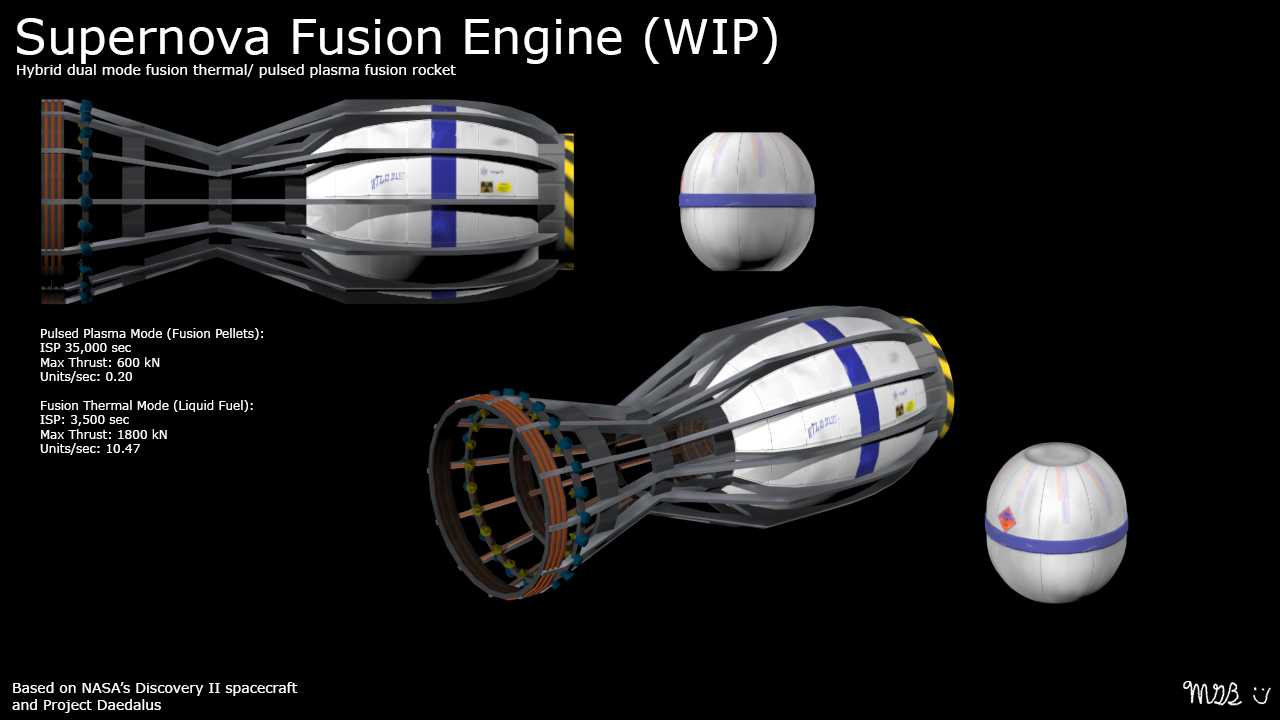
<style>
.page{position:relative;width:1280px;height:720px;background:#000000}
.page>*{position:absolute;margin:0}
.t1{font:48px "Verdana";color:#ffffff}
.t2{font:14px "Verdana";color:#ffffff}
.t3{font:12px "Verdana";color:#ffffff}
</style>
<div class="page">
<p class="t1" style="left:17px;top:17px;width:760px;height:47px">Supernova Fusion Engine (WIP)</p>
<p class="t2" style="left:17px;top:64px;width:439px;height:14px">Hybrid dual mode fusion thermal/ pulsed plasma fusion rocket</p>
<p class="t3" style="left:40px;top:328px;width:223px;height:127px">Pulsed Plasma Mode (Fusion Pellets):<br>ISP 35,000 sec<br>Max Thrust: 600 kN<br>Units/sec: 0.20<br><br>Fusion Thermal Mode (Liquid Fuel):<br>ISP: 3,500 sec<br>Max Thrust: 1800 kN<br>Units/sec: 10.47</p>
<p class="t2" style="left:12px;top:682px;width:286px;height:31px">Based on NASA’s Discovery II spacecraft <br>and Project Daedalus</p>
</div>
